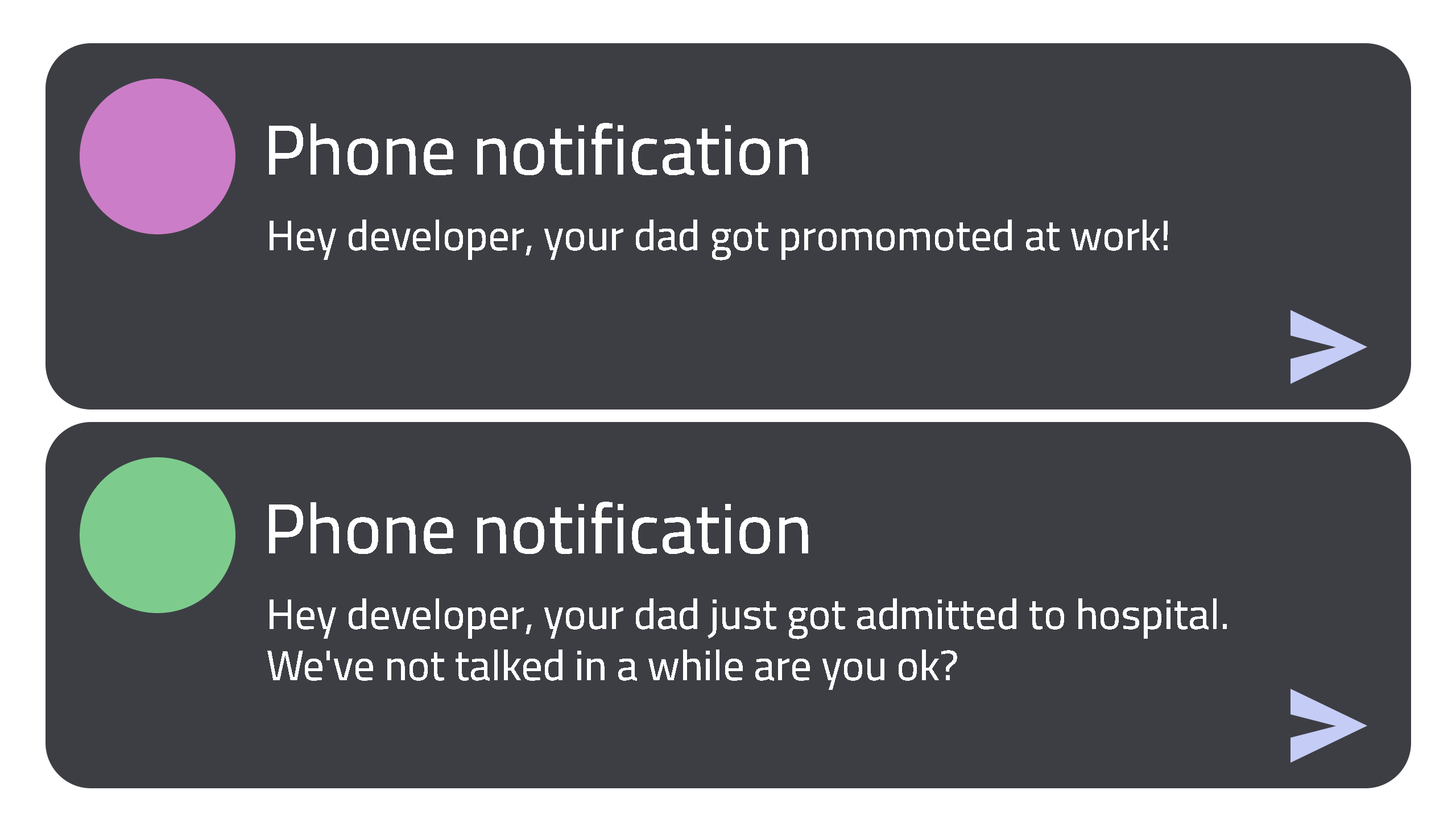
<style>
.page{position:relative;width:1456px;height:819px;background:#3d3e44}
.page>*{position:absolute;margin:0}
.t1{font:71.1px "Cairo-Medium";color:#ffffff}
.t2{font:42.7px "Cairo-Medium";color:#ffffff}
</style>
<div class="page">
<p class="t1" style="left:269px;top:123px;width:539px;height:52px">Phone notification</p>
<p class="t2" style="left:270px;top:220px;width:898px;height:40px">Hey developer, your dad got promomoted at work!</p>
<p class="t1" style="left:269px;top:502px;width:539px;height:52px">Phone notification</p>
<p class="t2" style="left:267px;top:598px;width:960px;height:92px">Hey developer, your dad just got admitted to hospital. <br>We've not talked in a while are you ok?</p>
</div>
